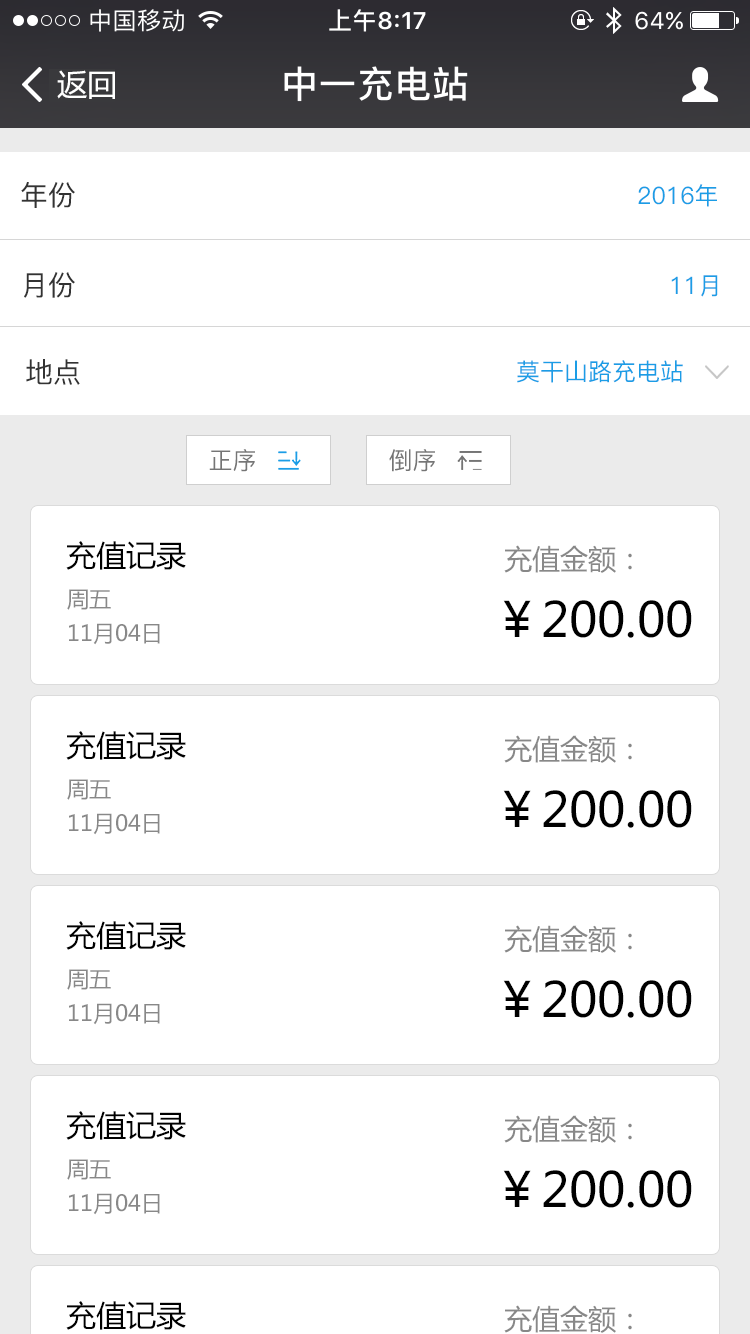
<style>
.page{position:relative;width:750px;height:1334px;background:#ffffff}
.page>*{position:absolute;margin:0}
.t1{font:30px "MicrosoftYaHei";color:#ffffff}
.t2{font:28px "PingFang-SC-Medium";color:#333333}
.t3{font:24px "PingFang-SC-Medium";color:#1b9de6}
.t4{font:24px "PingFang-SC-Medium";color:#757575}
.t5{font:30px "MicrosoftYaHei";color:#000000}
.t6{font:28px "MicrosoftYaHei";color:#888888}
.t7{font:22px/34px "MicrosoftYaHei";color:#888888}
.t8{font:48px "MicrosoftYaHei";color:#000000}
</style>
<div class="page">
<p class="t1" style="left:57px;top:70px;width:58px;height:29px">返回</p>
<p class="t2" style="left:21px;top:182px;width:54px;height:26px">年份</p>
<p class="t3" style="left:638px;top:184px;width:79px;height:23px">2016年</p>
<p class="t2" style="left:24px;top:272px;width:51px;height:26px">月份</p>
<p class="t3" style="left:671px;top:275px;width:47px;height:22px">11月</p>
<p class="t2" style="left:26px;top:359px;width:54px;height:26px">地点</p>
<p class="t3" style="left:517px;top:360px;width:166px;height:23px">莫干山路充电站</p>
<p class="t4" style="left:209px;top:449px;width:46px;height:23px">正序</p>
<p class="t4" style="left:389px;top:449px;width:46px;height:23px">倒序</p>
<p class="t5" style="left:66px;top:541px;width:120px;height:29px">充值记录</p>
<p class="t6" style="left:504px;top:545px;width:128px;height:28px">充值金额：</p>
<p class="t7" style="left:67px;top:589px;width:93px;height:56px">周五<br>11月04日</p>
<p class="t8" style="left:503px;top:600px;width:189px;height:38px">￥200.00</p>
<p class="t5" style="left:66px;top:731px;width:120px;height:29px">充值记录</p>
<p class="t6" style="left:504px;top:735px;width:128px;height:28px">充值金额：</p>
<p class="t7" style="left:67px;top:779px;width:93px;height:56px">周五<br>11月04日</p>
<p class="t8" style="left:503px;top:790px;width:189px;height:38px">￥200.00</p>
<p class="t5" style="left:66px;top:921px;width:120px;height:29px">充值记录</p>
<p class="t6" style="left:504px;top:925px;width:128px;height:28px">充值金额：</p>
<p class="t7" style="left:67px;top:969px;width:93px;height:56px">周五<br>11月04日</p>
<p class="t8" style="left:503px;top:980px;width:189px;height:38px">￥200.00</p>
<p class="t5" style="left:66px;top:1111px;width:120px;height:29px">充值记录</p>
<p class="t6" style="left:504px;top:1115px;width:128px;height:28px">充值金额：</p>
<p class="t7" style="left:67px;top:1159px;width:93px;height:56px">周五<br>11月04日</p>
<p class="t8" style="left:503px;top:1170px;width:189px;height:38px">￥200.00</p>
<p class="t5" style="left:66px;top:1301px;width:120px;height:29px">充值记录</p>
<p class="t6" style="left:504px;top:1305px;width:128px;height:28px">充值金额：</p>
</div>
